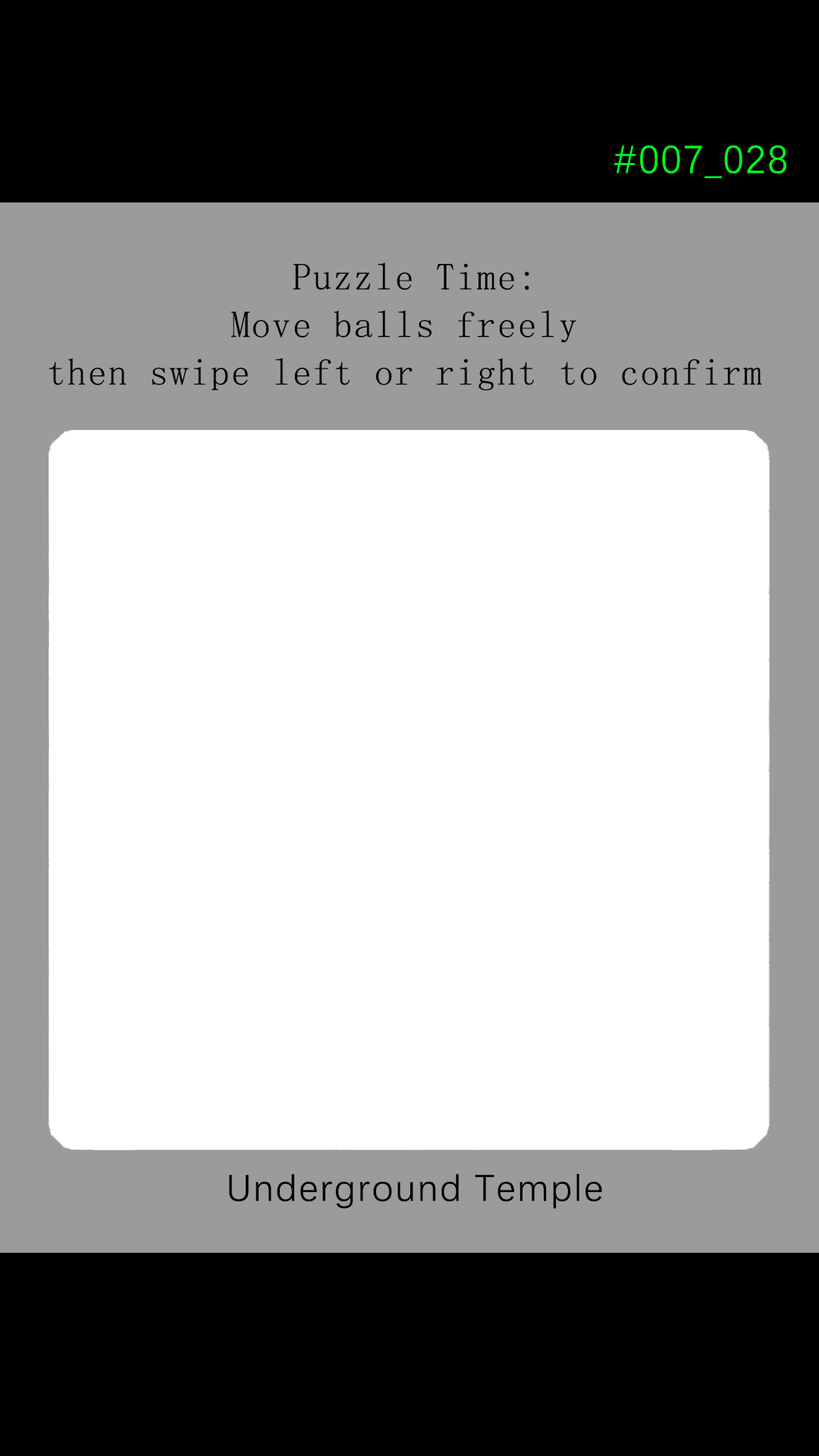
<style>
.page{position:relative;width:819px;height:1456px;background:#ffffff}
.page>*{position:absolute;margin:0}
.t1{font:39.2px "DengXian-Regular";letter-spacing:0.04em;color:#00ff1e}
.t2{font:37.9px/47.6px "SimSun";letter-spacing:0.04em;color:#000000}
.t3{font:37.9px "DengXian-Regular";letter-spacing:0.04em;color:#000000}
</style>
<div class="page">
<p class="t1" style="left:614px;top:145px;width:172px;height:33px">#007_028</p>
<p class="t2" style="left:49px;top:262px;width:713px;height:129px;text-align:center">Puzzle Time:<br>Move balls freely <br>then swipe left or right to confirm</p>
<p class="t3" style="left:229px;top:1174px;width:373px;height:35px">Underground Temple</p>
</div>
